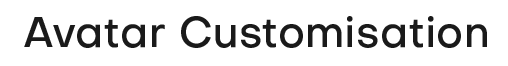
<style>
.page{position:relative;width:508px;height:66px;background:#ffffff}
.page>*{position:absolute;margin:0}
.t1{font:43px "Objectivity-Medium";color:#1a1a1a}
</style>
<div class="page">
<p class="t1" style="left:24px;top:16px;width:463px;height:32px">Avatar Customisation</p>
</div>
